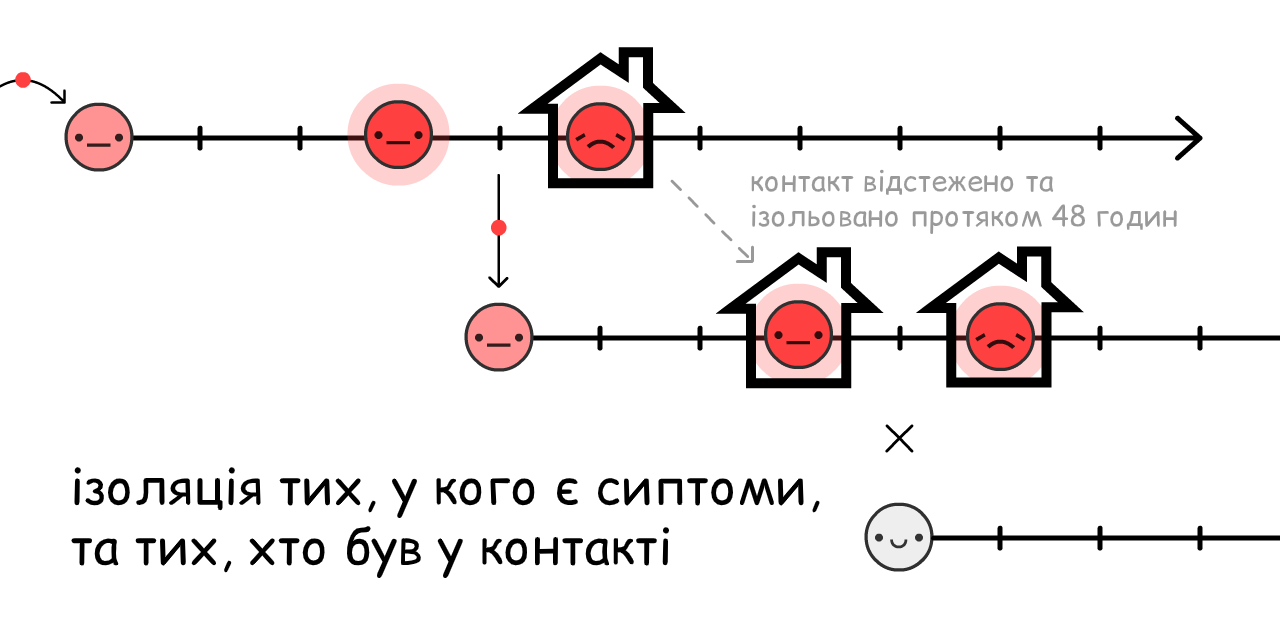
<style>
.page{position:relative;width:1280px;height:640px;background:#ffffff}
.page>*{position:absolute;margin:0}
.t1{font:29.1px "ComicRelief";color:#999999}
.t2{font:50px "ComicRelief";color:#000000}
</style>
<div class="page">
<p class="t1" style="left:751px;top:169px;width:426px;height:66px">контакт відстежено та<br>ізольовано протяком 48 годин</p>
<p class="t2" style="left:71px;top:467px;width:750px;height:112px">ізоляція тих, у кого є сиптоми, та тих, хто був у контакті</p>
</div>
